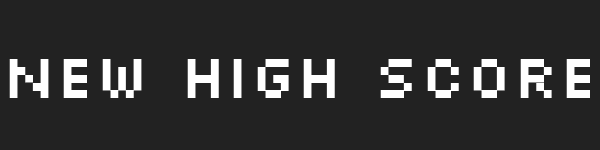
<style>
.page{position:relative;width:600px;height:150px;background:#222222}
.page>*{position:absolute;margin:0}
.t1{font:65px "Silkscreen";color:#ffffff}
</style>
<div class="page">
<p class="t1" style="left:9px;top:59px;width:581px;height:39px">New High Score</p>
</div>
